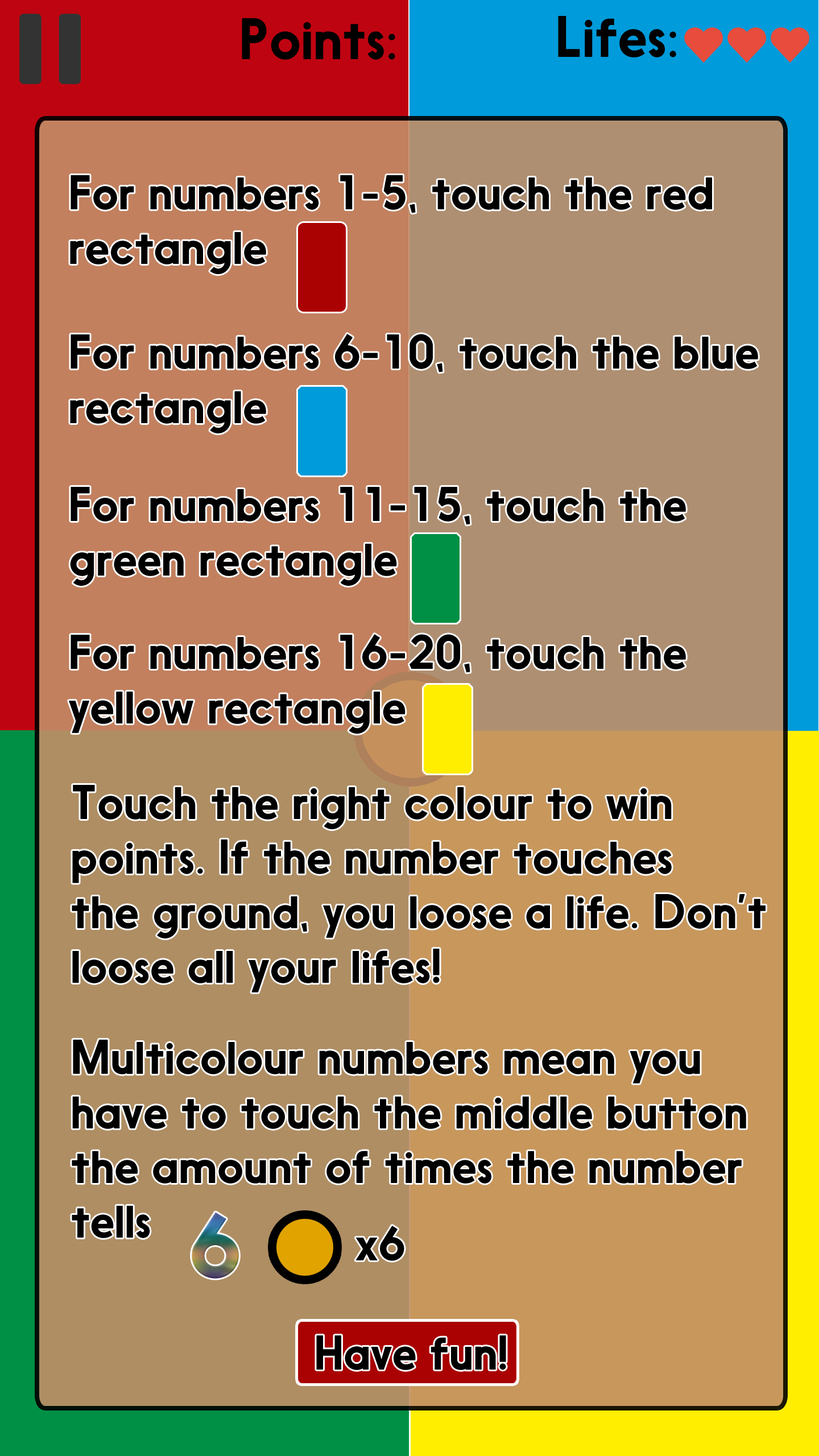
<style>
.page{position:relative;width:819px;height:1456px}
.page>*{position:absolute;margin:0}
.t1{font:54.6px "Nanami";color:#000000}
.t2{font:45.5px "Nanami";color:#000000}
.t3{font:85.8px "Nanami"}
</style>
<div class="page">
<p class="t1" style="left:558px;top:16px;width:118px;height:41px">Lifes:</p>
<p class="t1" style="left:242px;top:18px;width:153px;height:42px">Points:</p>
<p class="t2" style="left:70px;top:175px;width:642px;height:99px">For numbers 1-5, touch the red<br>rectangle</p>
<p class="t2" style="left:70px;top:334px;width:688px;height:99px">For numbers 6-10, touch the blue<br>rectangle</p>
<p class="t2" style="left:70px;top:487px;width:616px;height:99px">For numbers 11-15, touch the<br>green rectangle</p>
<p class="t2" style="left:69px;top:634px;width:617px;height:100px">For numbers 16-20, touch the<br>yellow rectangle</p>
<p class="t2" style="left:72px;top:785px;width:694px;height:207px">Touch the right colour to win<br>points. If the number touches<br>the ground, you loose a life. Don’t<br>loose all your lifes!</p>
<p class="t2" style="left:72px;top:1040px;width:674px;height:198px">Multicolour numbers mean you<br>have to touch the middle button<br>the amount of times the number<br>tells</p>
<p class="t3" style="left:192px;top:1212px;width:47px;height:67px">6</p>
<p class="t2" style="left:355px;top:1226px;width:49px;height:35px">x6</p>
<p class="t2" style="left:316px;top:1335px;width:190px;height:35px">Have fun!</p>
</div>
